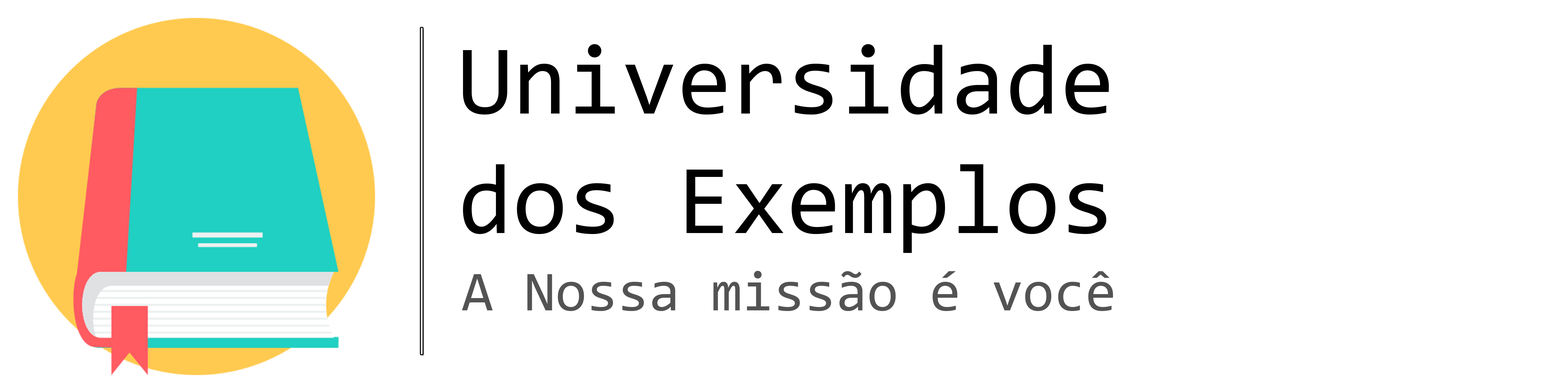
<style>
.page{position:relative;width:1568px;height:392px;background:#ffffff}
.page>*{position:absolute;margin:0}
.t1{font:99.6px "Consolas";color:#000000}
.t2{font:56.7px "Consolas";color:#535353}
</style>
<div class="page">
<p class="t1" style="left:463px;top:44px;width:646px;height:209px">Universidade<br>dos Exemplos</p>
<p class="t2" style="left:462px;top:271px;width:651px;height:40px">A Nossa missão é você</p>
</div>
